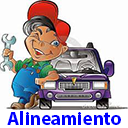
<style>
.page{position:relative;width:128px;height:128px;background:#fdfdfd}
.page>*{position:absolute;margin:0}
.t1{font:19px "MyriadPro-Bold";color:#0000ff}
</style>
<div class="page">
<p class="t1" style="left:7px;top:111px;width:114px;height:14px">Alineamiento</p>
</div>
